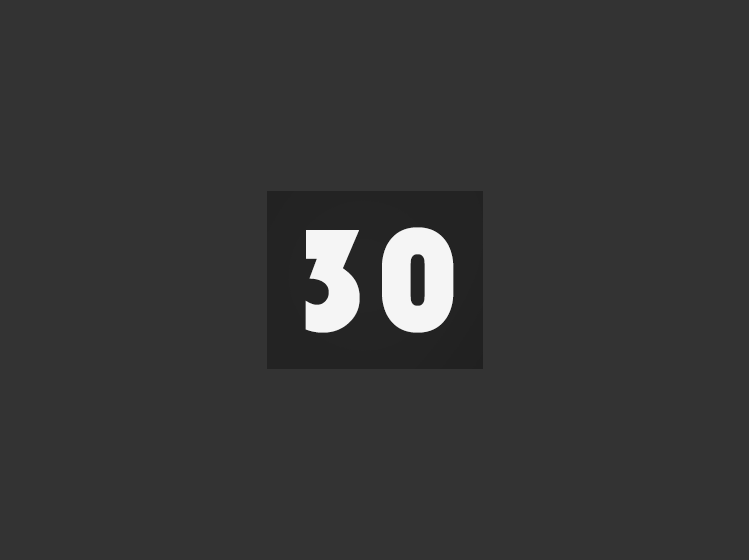
<style>
.page{position:relative;width:749px;height:560px;background:#333333}
.page>*{position:absolute;margin:0}
.t1{font:150px "Bauhaus93";color:#f5f5f5;font-variant:small-caps}
</style>
<div class="page">
<p class="t1" style="left:305px;top:227px;width:149px;height:106px">30</p>
</div>
